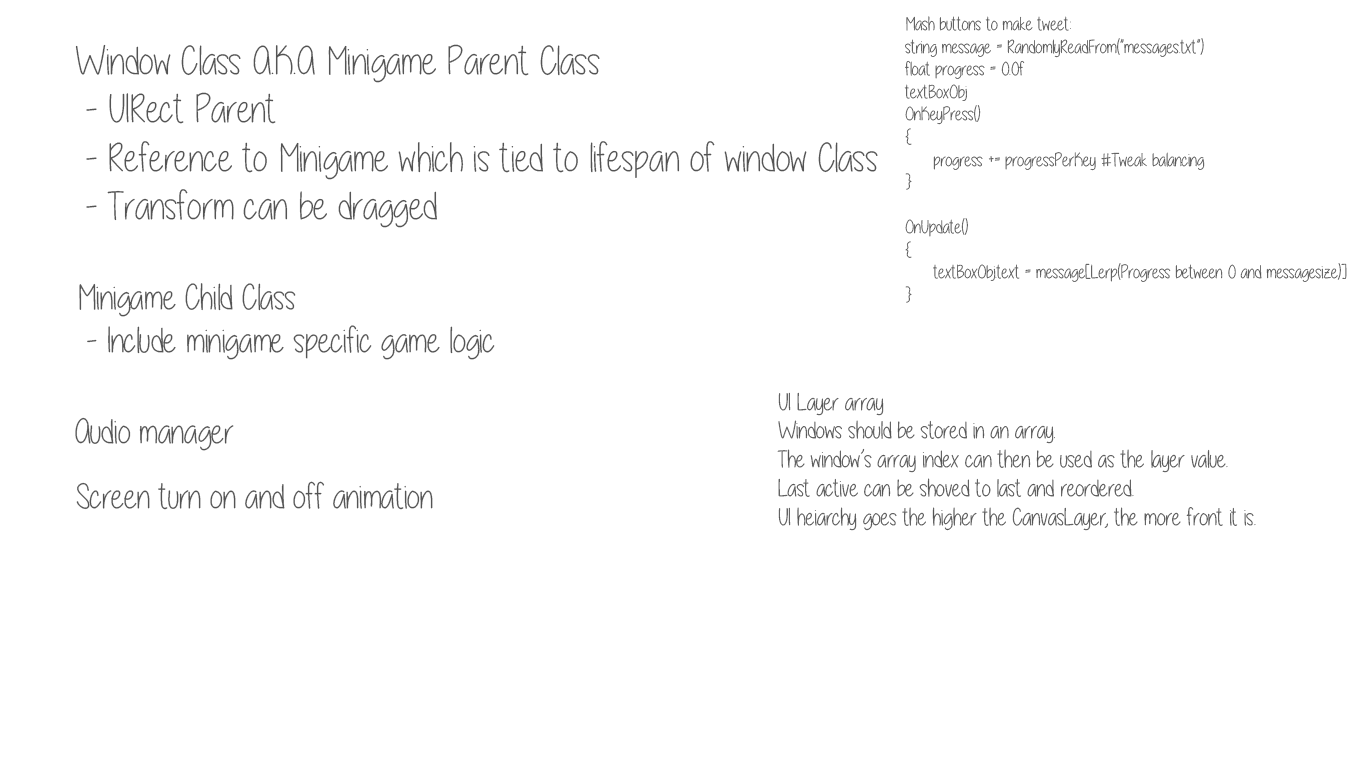
<style>
.page{position:relative;width:1366px;height:768px;background:#ffffff}
.page>*{position:absolute;margin:0}
.t1{font:18.8px "A-little-sunshine";color:#545454}
.t2{font:40.2px "A-little-sunshine";color:#545454}
.t3{font:35.8px "A-little-sunshine";color:#545454}
.t4{font:24px "A-little-sunshine";color:#545454}
.t5{font:35.2px "A-little-sunshine";color:#545454}
</style>
<div class="page">
<p class="t1" style="left:904px;top:16px;width:443px;height:287px">Mash buttons to make tweet:<br>string message = RandomlyReadFrom(”messages.txt”)<br>float progress = 0.0f<br>textBoxObj<br>OnKeyPress()<br>{<br> progress += progressPerKey #Tweak balancing<br>}<br><br>OnUpdate()<br>{<br> textBoxObj.text = message[Lerp(Progress between 0 and messagesize)]<br>}</p>
<p class="t2" style="left:75px;top:44px;width:803px;height:184px">Window Class A.K.A Minigame Parent Class<br> - UIRect Parent<br> - Reference to Minigame which is tied to lifespan of window Class<br> - Transform can be dragged</p>
<p class="t3" style="left:79px;top:283px;width:416px;height:77px">Minigame Child Class<br> - Include minigame specific game logic</p>
<p class="t4" style="left:777px;top:392px;width:479px;height:139px">UI Layer array<br>Windows should be stored in an array.<br>The window’s array index can then be used as the layer value.<br>Last active can be shoved to last and reordered.<br>UI heiarchy goes the higher the CanvasLayer, the more front it is.</p>
<p class="t5" style="left:75px;top:417px;width:159px;height:34px">Audio manager</p>
<p class="t5" style="left:76px;top:481px;width:357px;height:29px">Screen turn on and off animation</p>
</div>
